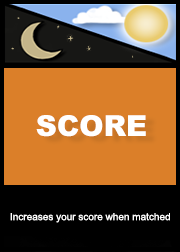
<style>
.page{position:relative;width:180px;height:252px;background:#db7f29}
.page>*{position:absolute;margin:0}
.t1{font:29px "Arial-Black";color:#ffffff}
.t2{font:10px "ArialMT";color:#ffffff}
</style>
<div class="page">
<p class="t1" style="left:36px;top:115px;width:110px;height:22px">SCORE</p>
<p class="t2" style="left:10px;top:213px;width:160px;height:10px">Increases your score when matched</p>
</div>
